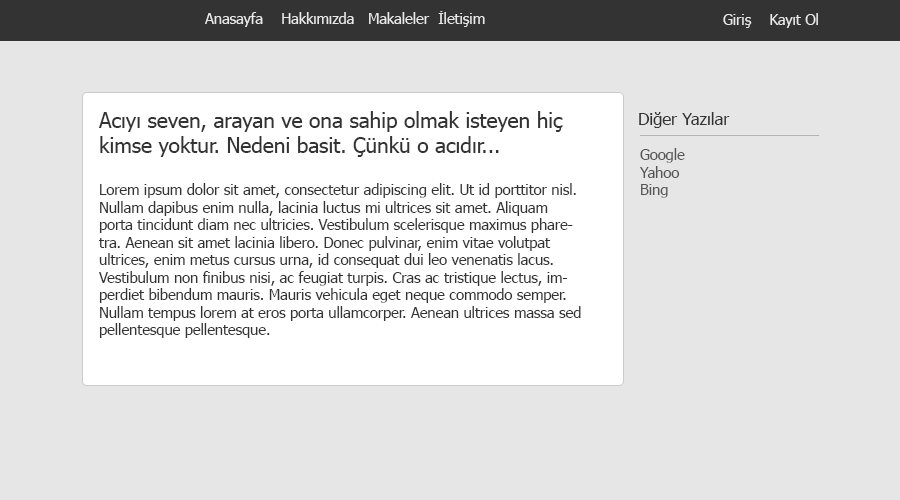
<style>
.page{position:relative;width:900px;height:500px;background:#e6e6e6}
.page>*{position:absolute;margin:0}
.t1{font:14.6px "Tahoma";color:#e9e9e9}
.t2{font:20.8px "Tahoma";color:#333333}
.t3{font:16.7px "Tahoma";color:#333333}
.t4{font:14.6px "Tahoma";color:#555555}
.t5{font:14.6px "Tahoma";color:#333333}
</style>
<div class="page">
<p class="t1" style="left:205px;top:11px;width:280px;height:16px">Anasayfa    Hakkımızda   Makaleler  İletişim</p>
<p class="t1" style="left:723px;top:13px;width:95px;height:15px">Giriş    Kayıt Ol</p>
<p class="t2" style="left:99px;top:111px;width:464px;height:46px">Acıyı seven, arayan ve ona sahip olmak isteyen hiç kimse yoktur. Nedeni basit. Çünkü o acıdır...</p>
<p class="t3" style="left:639px;top:112px;width:91px;height:16px">Diğer Yazılar</p>
<p class="t4" style="left:640px;top:148px;width:45px;height:50px">Google<br>Yahoo<br>Bing</p>
<p class="t5" style="left:99px;top:183px;width:482px;height:155px">Lorem ipsum dolor sit amet, consectetur adipiscing elit. Ut id porttitor nisl. Nullam dapibus enim nulla, lacinia luctus mi ultrices sit amet. Aliquam porta tincidunt diam nec ultricies. Vestibulum scelerisque maximus pharetra. Aenean sit amet lacinia libero. Donec pulvinar, enim vitae volutpat ultrices, enim metus cursus urna, id consequat dui leo venenatis lacus. Vestibulum non finibus nisi, ac feugiat turpis. Cras ac tristique lectus, imperdiet bibendum mauris. Mauris vehicula eget neque commodo semper. Nullam tempus lorem at eros porta ullamcorper. Aenean ultrices massa sed pellentesque pellentesque.</p>
</div>
